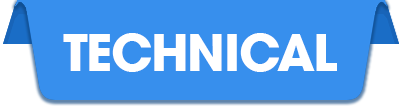
<style>
.page{position:relative;width:400px;height:110px;background:#378fed}
.page>*{position:absolute;margin:0}
.t1{font:85.3px "AvantGardeLT-Bold";letter-spacing:-0.025em;color:#ffffff}
</style>
<div class="page">
<p class="t1" style="left:63px;top:33px;width:274px;height:39px">TECHNICAL</p>
</div>
